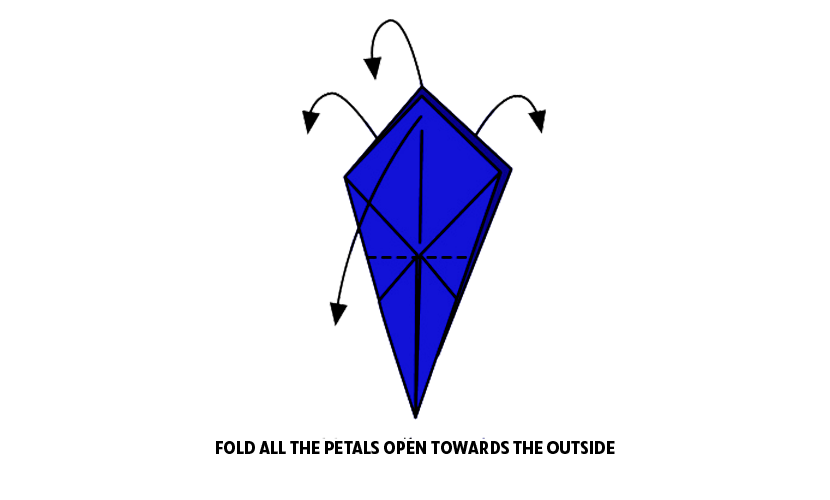
<style>
.page{position:relative;width:830px;height:500px;background:#ffffff}
.page>*{position:absolute;margin:0}
.t1{font:18px "RuckSack-Bold";color:#000000}
</style>
<div class="page">
<p class="t1" style="left:216px;top:441px;width:399px;height:13px">FOLD ALL THE PETALS OPEN TOWARDS THE OUTSIDE</p>
</div>
